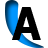
<style>
.page{position:relative;width:48px;height:48px;background:#ffffff}
.page>*{position:absolute;margin:0}
.t1{font:44.9px "Tahoma-Bold";color:#000000;scale:0.93 1}
</style>
<div class="page">
<p class="t1" style="left:12px;top:7px;width:29px;height:33px">A</p>
</div>
